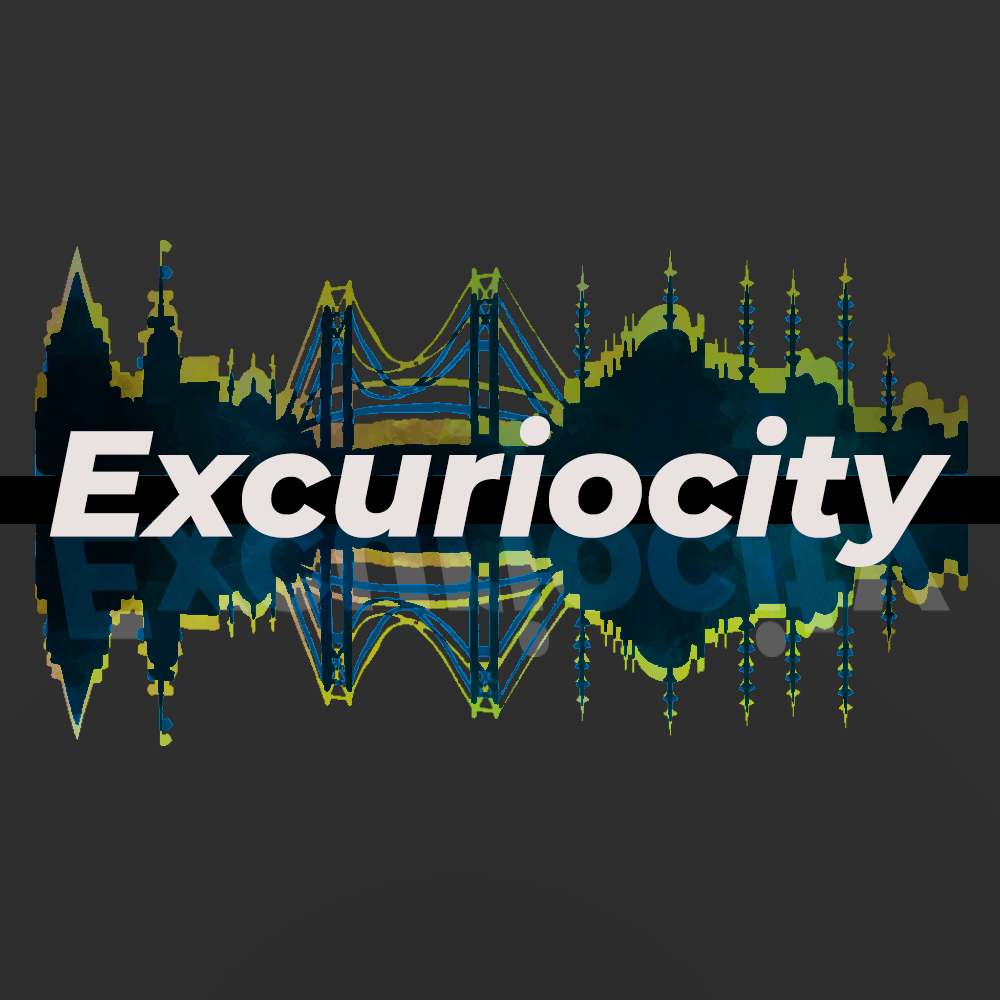
<style>
.page{position:relative;width:1000px;height:1000px}
.page>*{position:absolute;margin:0}
.t1{font:150px "Montserrat-ExtraBoldItalic";color:#eae1e1}
</style>
<div class="page">
<p class="t1" style="left:50px;top:416px;width:901px;height:151px">Excuriocity</p>
</div>
